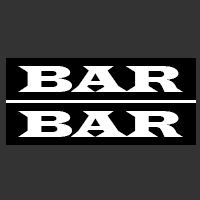
<style>
.page{position:relative;width:200px;height:200px;background:#333333}
.page>*{position:absolute;margin:0}
.t1{font:39px "LatinWide";color:#ffffff}
</style>
<div class="page">
<p class="t1" style="left:18px;top:66px;width:165px;height:26px">BAR</p>
<p class="t1" style="left:18px;top:111px;width:165px;height:26px">BAR</p>
</div>
